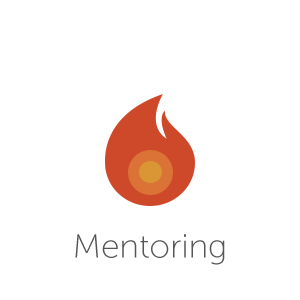
<style>
.page{position:relative;width:300px;height:300px;background:#ffffff}
.page>*{position:absolute;margin:0}
.t1{font:33.3px "MuseoSans-100";color:#555555}
</style>
<div class="page">
<p class="t1" style="left:75px;top:234px;width:150px;height:31px">Mentoring</p>
</div>
